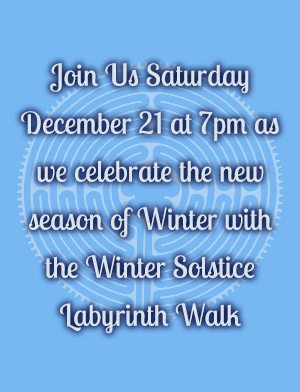
<style>
.page{position:relative;width:300px;height:392px;background:#77b7f2}
.page>*{position:absolute;margin:0}
.t1{font:30px/48px "LobsterTwo";letter-spacing:0.01em;color:#d9e5e9}
.t2{font:18px/24px "Verdana";letter-spacing:0.01em;color:#d9e5e9}
</style>
<div class="page">
<p class="t1" style="left:21px;top:63px;width:258px;height:271px;text-align:center"><span class="t2"><br><br></span>Join Us Saturday<br>December 21 at 7pm as<br>we celebrate the new<br>season of Winter with<br>the Winter Solstice<br>Labyrinth Walk</p>
</div>
